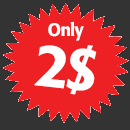
<style>
.page{position:relative;width:130px;height:130px;background:#ed2124}
.page>*{position:absolute;margin:0}
.t1{font:18px "FormataBQ-Medium";letter-spacing:-0.05em;color:#ffffff}
.t2{font:60px "FormataBQ-Medium";letter-spacing:-0.05em;color:#ffffff}
</style>
<div class="page">
<p class="t1" style="left:48px;top:21px;width:36px;height:20px">Only</p>
<p class="t2" style="left:34px;top:45px;width:63px;height:50px;rotate:6deg">2$</p>
</div>
